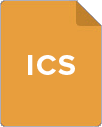
<style>
.page{position:relative;width:102px;height:127px;background:#e89e3d}
.page>*{position:absolute;margin:0}
.t1{font:30px "ProximaNova-Bold";letter-spacing:0.05em;color:#ffffff}
</style>
<div class="page">
<p class="t1" style="left:28px;top:55px;width:47px;height:20px">ICS</p>
</div>
